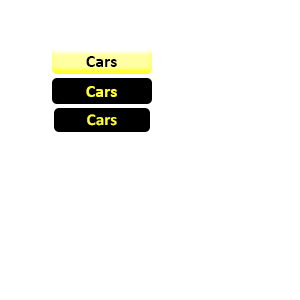
<style>
.page{position:relative;width:300px;height:300px;background:#ffffff}
.page>*{position:absolute;margin:0}
.t1{font:18px "Calibri-Bold";color:#000000}
.t2{font:18px "Calibri-Bold";color:#ffff32}
.t3{font:16.6px "Calibri-Bold";color:#ffff32;scale:1.04 1}
</style>
<div class="page">
<p class="t1" style="left:86px;top:56px;width:31px;height:11px">Cars</p>
<p class="t2" style="left:86px;top:86px;width:31px;height:11px">Cars</p>
<p class="t3" style="left:87px;top:114px;width:30px;height:12px">Cars</p>
</div>
